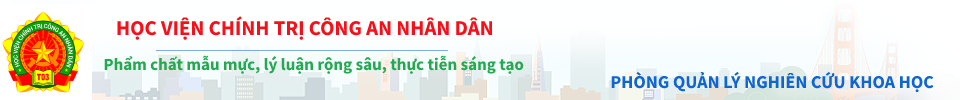
<style>
.page{position:relative;width:960px;height:100px;background:#feffff}
.page>*{position:absolute;margin:0}
.t1{font:21px "Calibri-Bold";color:#f6101a}
.t2{font:17px "Calibri-Bold";color:#24a94f}
.t3{font:18.1px "Calibri-Bold";color:#0e66d3}
</style>
<div class="page">
<p class="t1" style="left:117px;top:16px;width:376px;height:24px">HỌC VIỆN CHÍNH TRỊ CÔNG AN NHÂN DÂN</p>
<p class="t2" style="left:104px;top:55px;width:420px;height:19px">Phẩm chất mẫu mực, lý luận rộng sâu, thực tiễn sáng tạo</p>
<p class="t3" style="left:611px;top:71px;width:323px;height:22px">PHÒNG QUẢN LÝ NGHIÊN CỨU KHOA HỌC</p>
</div>
